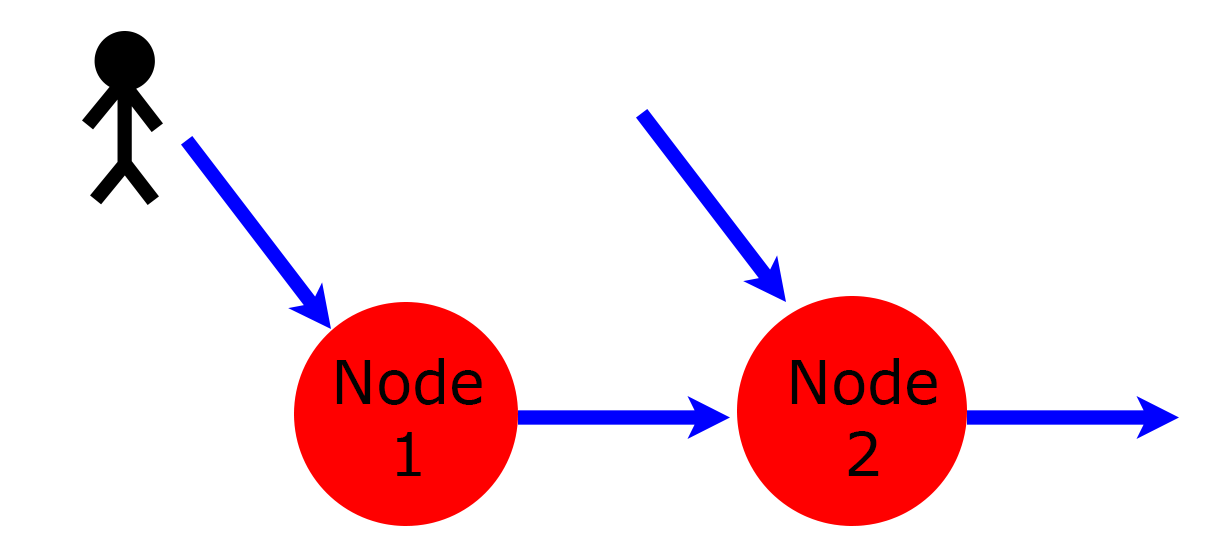
<style>
.page{position:relative;width:1225px;height:558px;background:#ffffff}
.page>*{position:absolute;margin:0}
.t1{font:60px "Verdana";color:#020202}
</style>
<div class="page">
<p class="t1" style="left:336px;top:358px;width:146px;height:118px;text-align:center">Node<br>1</p>
<p class="t1" style="left:791px;top:358px;width:146px;height:118px;text-align:center">Node<br>2</p>
</div>
